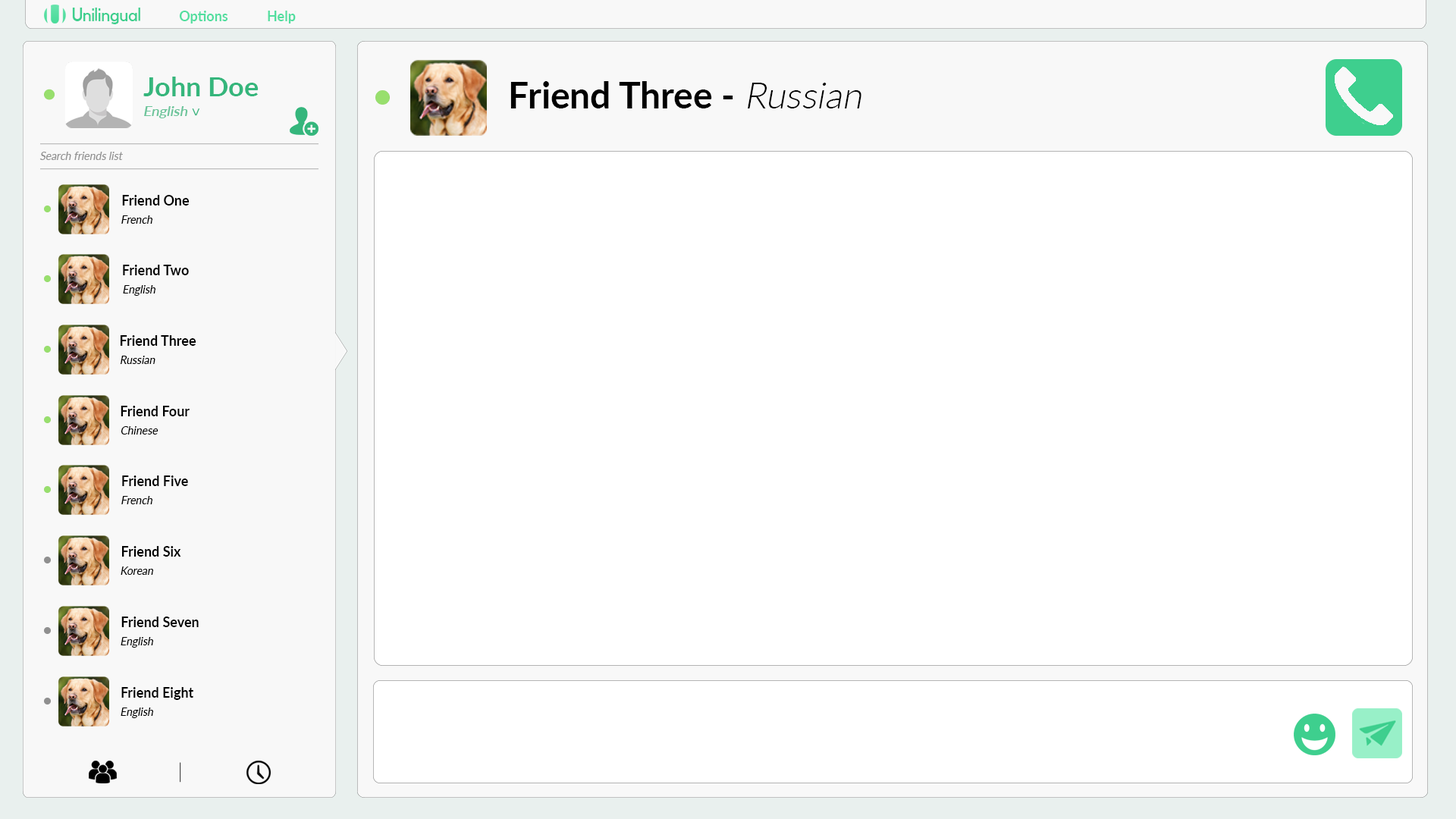
<style>
.page{position:relative;width:1456px;height:819px;background:#ffffff}
.page>*{position:absolute;margin:0}
.t1{font:19.1px "FundamentalBrigade";color:#3ecf8e;scale:1.03 1}
.t2{font:13.5px "Lato-Bold";color:#52de9f}
.t3{font:26.5px "Lato-Bold";color:#35b67c;scale:1.03 1}
.t4{font:36px "Lato-Bold";color:#000000}
.t5{font:36px "Lato-Light";color:#000000;font-style:italic}
.t6{font:14px "Lato-Semibold";color:#6bc49a;font-style:italic}
.t7{font:10.5px "Lato-Regular";color:#929292;font-style:italic}
.t8{font:13.5px "Lato-Bold";color:#000000}
.t9{font:10.5px "Lato-Regular";color:#000000;font-style:italic}
</style>
<div class="page">
<p class="t1" style="left:72px;top:8px;width:68px;height:16px">Unilingual</p>
<p class="t2" style="left:179px;top:11px;width:49px;height:13px">Options</p>
<p class="t2" style="left:268px;top:11px;width:28px;height:13px">Help</p>
<p class="t3" style="left:143px;top:77px;width:116px;height:19px">John Doe</p>
<p class="t4" style="left:510px;top:81px;width:351px;height:27px">Friend Three - <span class="t5">Russian</span></p>
<p class="t6" style="left:144px;top:106px;width:44px;height:12px">English</p>
<p class="t7" style="left:39px;top:152px;width:84px;height:8px">Search friends list</p>
<p class="t8" style="left:122px;top:195px;width:67px;height:11px">Friend One</p>
<p class="t9" style="left:121px;top:215px;width:31px;height:9px">French</p>
<p class="t8" style="left:123px;top:265px;width:66px;height:10px">Friend Two</p>
<p class="t9" style="left:123px;top:285px;width:32px;height:11px">English</p>
<p class="t8" style="left:121px;top:335px;width:75px;height:11px">Friend Three</p>
<p class="t9" style="left:120px;top:356px;width:35px;height:8px">Russian</p>
<p class="t8" style="left:121px;top:406px;width:69px;height:10px">Friend Four</p>
<p class="t9" style="left:121px;top:426px;width:37px;height:9px">Chinese</p>
<p class="t8" style="left:122px;top:475px;width:66px;height:11px">Friend Five</p>
<p class="t9" style="left:121px;top:496px;width:31px;height:8px">French</p>
<p class="t8" style="left:122px;top:546px;width:59px;height:11px">Friend Six</p>
<p class="t9" style="left:121px;top:566px;width:32px;height:9px">Korean</p>
<p class="t8" style="left:121px;top:617px;width:78px;height:10px">Friend Seven</p>
<p class="t9" style="left:121px;top:637px;width:32px;height:11px">English</p>
<p class="t8" style="left:121px;top:687px;width:73px;height:13px">Friend Eight</p>
<p class="t9" style="left:121px;top:708px;width:32px;height:10px">English</p>
</div>
